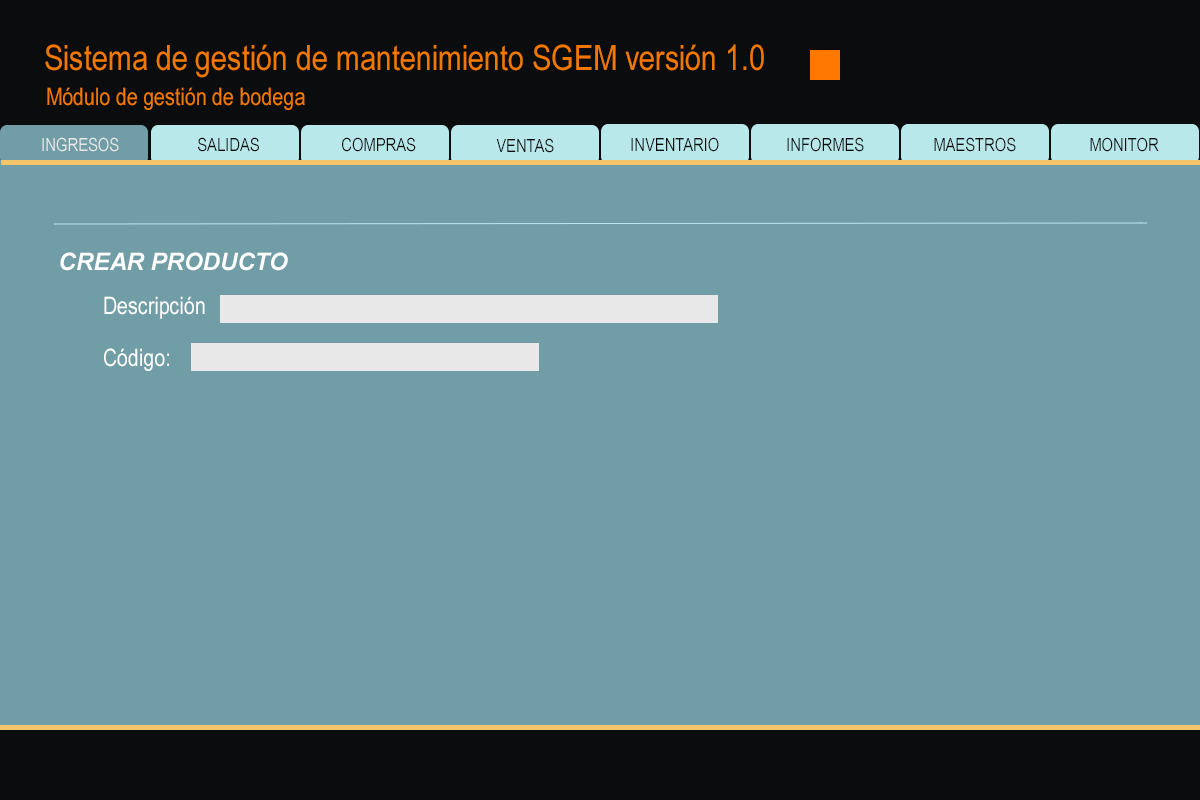
<style>
.page{position:relative;width:1200px;height:800px;background:#719da7}
.page>*{position:absolute;margin:0}
.t1{font:35px "ArialNarrow";color:#f07800}
.t2{font:24px "ArialNarrow";color:#f07800}
.t3{font:18px "ArialNarrow";color:#e8e8e8}
.t4{font:18px "ArialNarrow";color:#0b0c0e}
.t5{font:24px "Arial-BoldItalicMT";color:#feffff}
.t6{font:24px "ArialNarrow";color:#feffff}
</style>
<div class="page">
<p class="t1" style="left:45px;top:44px;width:719px;height:34px">Sistema de gestión de mantenimiento SGEM versión 1.0</p>
<p class="t2" style="left:47px;top:87px;width:258px;height:23px">Módulo de gestión de bodega</p>
<p class="t3" style="left:42px;top:137px;width:77px;height:15px">INGRESOS</p>
<p class="t4" style="left:198px;top:137px;width:61px;height:15px">SALIDAS</p>
<p class="t4" style="left:342px;top:137px;width:74px;height:15px">COMPRAS</p>
<p class="t4" style="left:631px;top:137px;width:88px;height:15px">INVENTARIO</p>
<p class="t4" style="left:787px;top:137px;width:77px;height:15px">INFORMES</p>
<p class="t4" style="left:934px;top:137px;width:82px;height:15px">MAESTROS</p>
<p class="t4" style="left:1090px;top:137px;width:69px;height:15px">MONITOR</p>
<p class="t4" style="left:496px;top:138px;width:58px;height:15px">VENTAS</p>
<p class="t5" style="left:60px;top:252px;width:228px;height:19px">CREAR PRODUCTO</p>
<p class="t6" style="left:104px;top:296px;width:101px;height:23px">Descripción</p>
<p class="t6" style="left:104px;top:348px;width:65px;height:23px">Código:</p>
</div>
